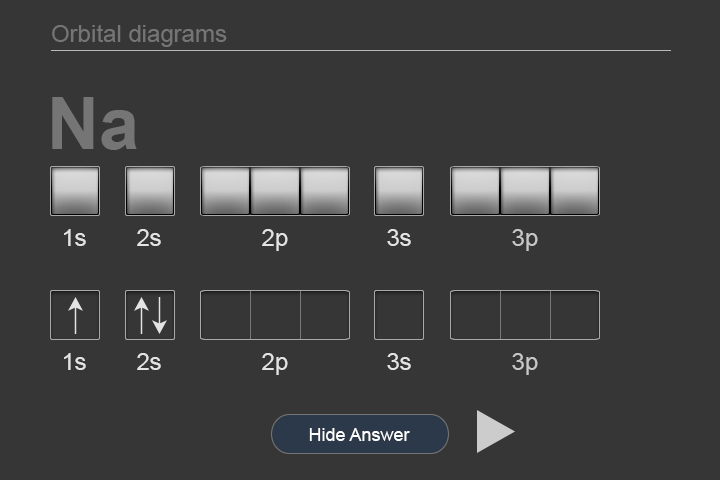
<style>
.page{position:relative;width:720px;height:480px;background:#363636}
.page>*{position:absolute;margin:0}
.t1{font:24px "ArialMT";color:#757575}
.t2{font:72px "Arial-BoldMT";color:#757575}
.t3{font:24px "ArialMT";color:#e4e4e4}
.t4{font:24px "ArialMT";color:#c7c7c7}
.t5{font:18px "ArialMT";color:#fffefe}
</style>
<div class="page">
<p class="t1" style="left:52px;top:24px;width:175px;height:23px">Orbital diagrams</p>
<p class="t2" style="left:52px;top:97px;width:85px;height:53px">Na</p>
<p class="t3" style="left:64px;top:229px;width:22px;height:17px">1s</p>
<p class="t3" style="left:137px;top:229px;width:24px;height:17px">2s</p>
<p class="t3" style="left:262px;top:229px;width:26px;height:22px">2p</p>
<p class="t3" style="left:387px;top:229px;width:24px;height:17px">3s</p>
<p class="t4" style="left:512px;top:229px;width:26px;height:22px">3p</p>
<p class="t3" style="left:64px;top:353px;width:22px;height:17px">1s</p>
<p class="t3" style="left:137px;top:353px;width:24px;height:17px">2s</p>
<p class="t3" style="left:262px;top:353px;width:26px;height:22px">2p</p>
<p class="t3" style="left:387px;top:353px;width:24px;height:17px">3s</p>
<p class="t4" style="left:512px;top:353px;width:26px;height:22px">3p</p>
<p class="t5" style="left:309px;top:428px;width:101px;height:13px">Hide Answer</p>
</div>
